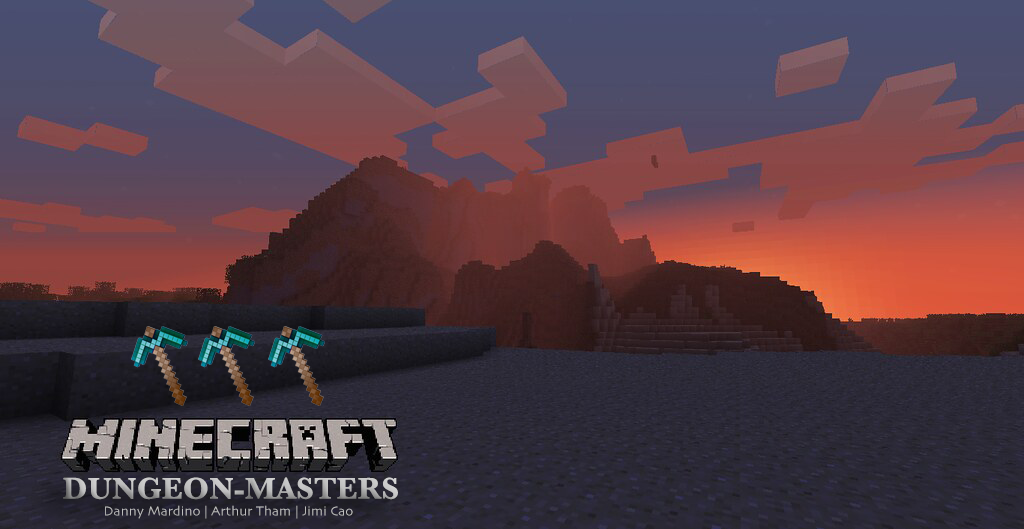
<style>
.page{position:relative;width:1024px;height:529px}
.page>*{position:absolute;margin:0}
.t1{font:31.6px "Baskerville-Bold";color:#bdbdbd}
.t2{font:13.8px "Skia-Regular";color:#bdbdbd}
</style>
<div class="page">
<p class="t1" style="left:63px;top:477px;width:335px;height:23px">DUNGEON-MASTERS</p>
<p class="t2" style="left:105px;top:505px;width:248px;height:14px">Danny Mardino | Arthur Tham | Jimi Cao</p>
</div>
